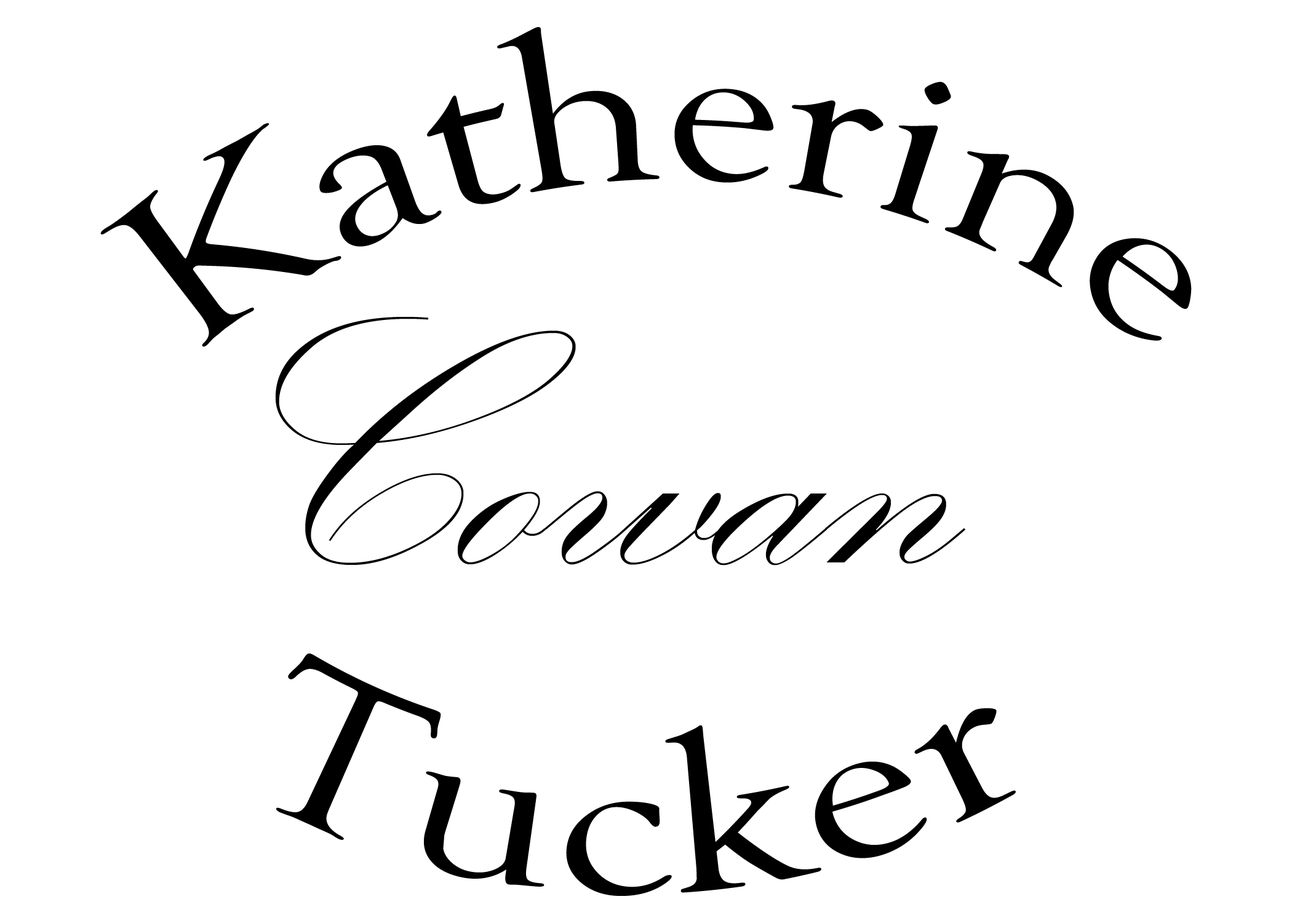
<style>
.page{position:relative;width:1292px;height:923px;background:#ffffff}
.page>*{position:absolute;margin:0}
.t1{font:226.6px "GoudyOldStyleT-Regular";color:#000000}
.t2{font:362.5px "KunstlerScript";color:#000000}
</style>
<div class="page">
<p class="t1" style="left:100px;top:27px;width:1092px;height:320px">Katherine</p>
<p class="t2" style="left:275px;top:317px;width:690px;height:248px">Cowan</p>
<p class="t1" style="left:276px;top:653px;width:740px;height:243px">Tucker</p>
</div>
